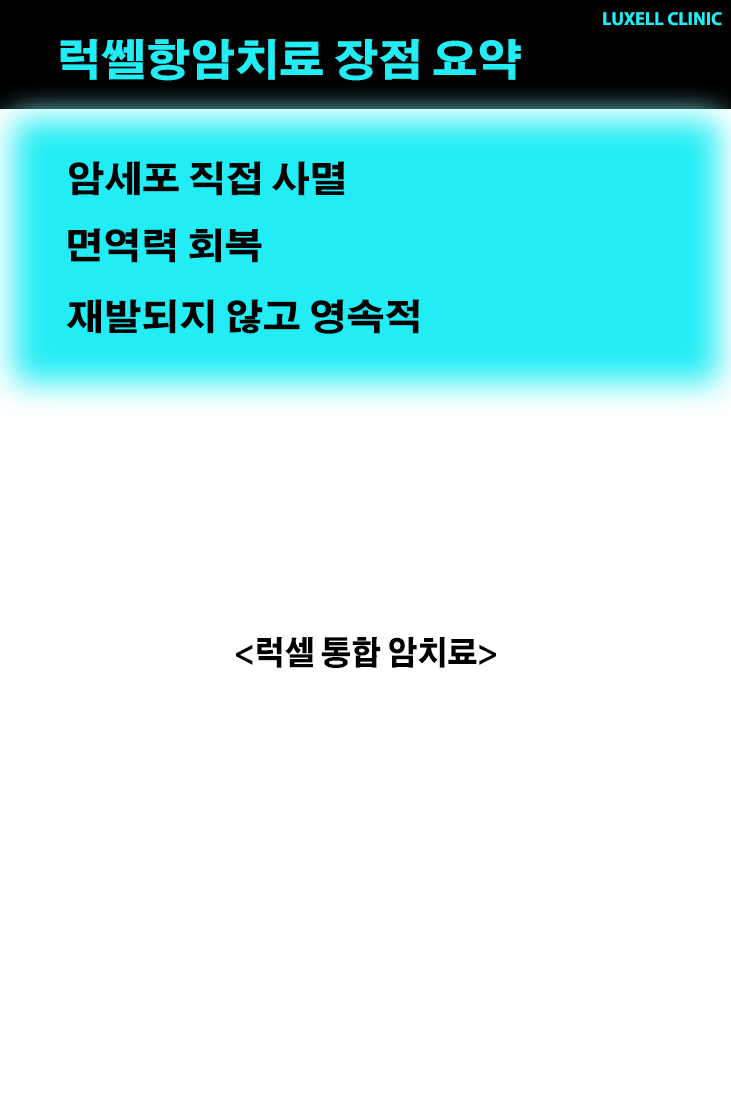
<style>
.page{position:relative;width:731px;height:1094px;background:#ffffff}
.page>*{position:absolute;margin:0}
.t1{font:16.2px "AdobeGothicStd-Bold";color:#22edf4;scale:1.11 1}
.t2{font:43.2px "AdobeGothicStd-Bold";color:#22edf4;scale:1.03 1}
.t3{font:36px "AdobeGothicStd-Bold";color:#000000;scale:1.05 1}
.t4{font:32.6px "AdobeGothicStd-Bold";color:#000000;scale:0.92 1}
</style>
<div class="page">
<p class="t1" style="left:603px;top:12px;width:119px;height:14px">LUXELL CLINIC</p>
<p class="t2" style="left:60px;top:39px;width:461px;height:42px">럭쎌항암치료 장점 요약</p>
<p class="t3" style="left:69px;top:161px;width:276px;height:35px">암세포 직접 사멸</p>
<p class="t3" style="left:68px;top:228px;width:194px;height:35px">면역력 회복</p>
<p class="t3" style="left:66px;top:299px;width:353px;height:35px">재발되지 않고 영속적</p>
<p class="t4" style="left:236px;top:637px;width:260px;height:31px">&lt;럭셀 통합 암치료&gt;</p>
</div>
